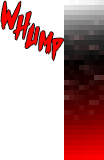
<style>
.page{position:relative;width:104px;height:160px;background:#ffffff}
.page>*{position:absolute;margin:0}
.t1{font:26.5px "outrunfuture";color:#ff0000;text-transform:uppercase;scale:0.79 1}
.t2{font:27px "outrunfuture";color:#ff0000;text-transform:uppercase;scale:0.75 1}
.t3{font:22px "outrunfuture";color:#ff0000;text-transform:uppercase;scale:0.83 1}
.t4{font:20px "outrunfuture";color:#ff0000;text-transform:uppercase;scale:0.86 1}
.t5{font:20.1px "outrunfuture";color:#ff0000;text-transform:uppercase;scale:0.68 1}
</style>
<div class="page">
<p class="t1" style="left:1px;top:1px;width:20px;height:28px">W</p>
<p class="t2" style="left:13px;top:11px;width:18px;height:29px;rotate:-18deg">h</p>
<p class="t3" style="left:25px;top:23px;width:14px;height:25px;rotate:4deg">u</p>
<p class="t4" style="left:39px;top:31px;width:14px;height:23px;rotate:7deg">m</p>
<p class="t5" style="left:52px;top:38px;width:12px;height:23px;rotate:-5deg">p</p>
</div>
